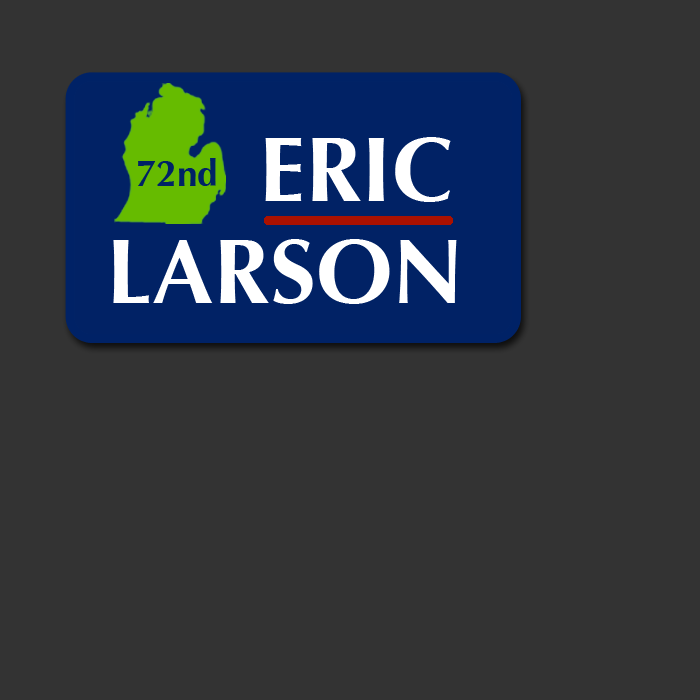
<style>
.page{position:relative;width:700px;height:700px;background:#333333}
.page>*{position:absolute;margin:0}
.t1{font:92px "Optima-Bold";color:#ffffff}
.t2{font:36.9px "Optima-Bold";color:#002266}
</style>
<div class="page">
<p class="t1" style="left:265px;top:137px;width:186px;height:65px">ERIC</p>
<p class="t2" style="left:138px;top:158px;width:78px;height:28px">72nd</p>
<p class="t1" style="left:113px;top:239px;width:344px;height:65px">LARSON</p>
</div>
